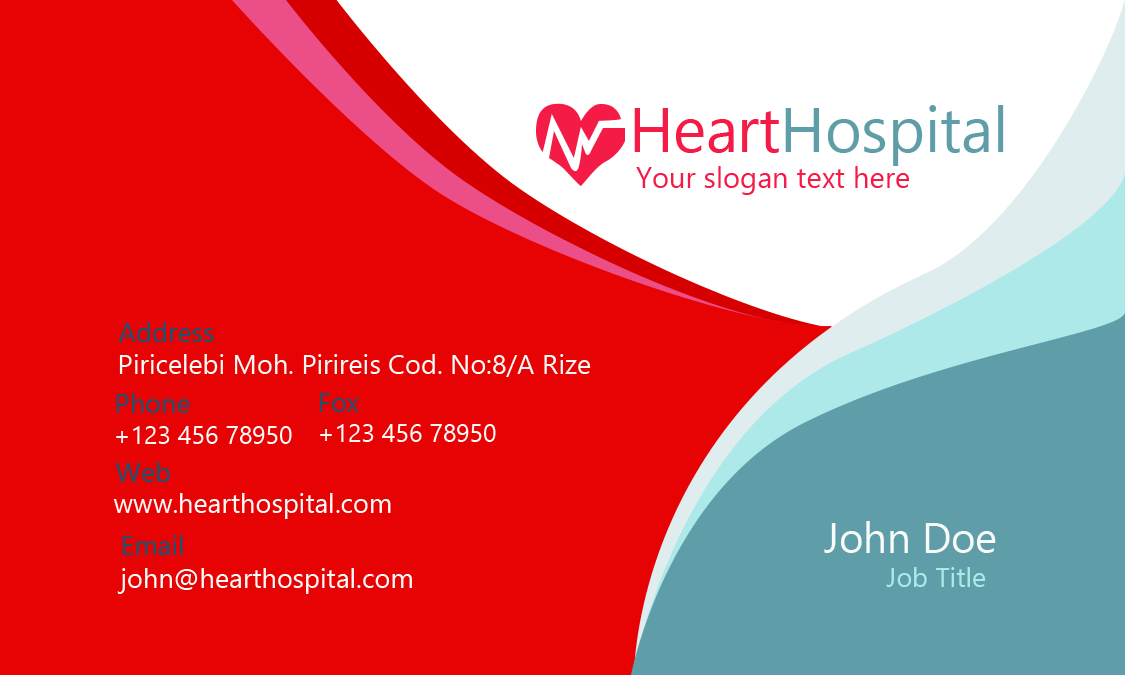
<style>
.page{position:relative;width:1125px;height:675px;background:#e70204}
.page>*{position:absolute;margin:0}
.t1{font:62.5px "NirmalaUI";color:#5f9da9}
.t2{font:62.5px "NirmalaUI";color:#f41b46}
.t3{font:29.2px "NirmalaUI";color:#f41b46}
.t4{font:27.1px "NirmalaUI";color:#20516f}
.t5{font:27.1px "NirmalaUI";color:#f9fbf9}
.t6{font:25px "NirmalaUI";color:#f9fbf9}
.t7{font:41.7px "NirmalaUI";color:#f9fbf9}
.t8{font:27.1px "NirmalaUI";color:#aee9e9}
</style>
<div class="page">
<p class="t1" style="left:634px;top:105px;width:370px;height:61px"><span class="t2">Heart</span>Hospital</p>
<p class="t3" style="left:636px;top:166px;width:273px;height:29px">Your slogan text here</p>
<p class="t4" style="left:119px;top:322px;width:95px;height:20px">Address</p>
<p class="t5" style="left:119px;top:354px;width:472px;height:23px">Piricelebi Moh. Pirireis Cod. No:8/A Rize</p>
<p class="t4" style="left:116px;top:393px;width:74px;height:20px">Phone</p>
<p class="t4" style="left:319px;top:393px;width:40px;height:19px">Fox</p>
<p class="t6" style="left:320px;top:424px;width:176px;height:18px">+123 456 78950</p>
<p class="t6" style="left:116px;top:426px;width:176px;height:18px">+123 456 78950</p>
<p class="t4" style="left:115px;top:462px;width:55px;height:20px">Web</p>
<p class="t5" style="left:113px;top:493px;width:278px;height:26px">www.hearthospital.com</p>
<p class="t7" style="left:824px;top:521px;width:172px;height:32px">John Doe</p>
<p class="t4" style="left:122px;top:535px;width:61px;height:20px">Email</p>
<p class="t5" style="left:117px;top:568px;width:295px;height:26px">john@hearthospital.com</p>
<p class="t8" style="left:886px;top:567px;width:100px;height:20px">Job Title</p>
</div>
